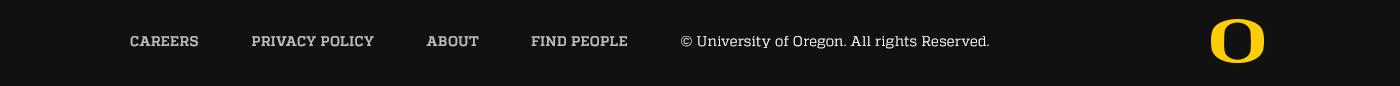
<style>
.page{position:relative;width:1400px;height:86px;background:#111111}
.page>*{position:absolute;margin:0}
.t1{font:14px "Quadon-Bold";letter-spacing:0.025em;color:#bbbbbb;text-transform:uppercase}
.t2{font:14px "Quadon-Regular";letter-spacing:0.025em;color:#ffffff;text-transform:uppercase}
.t3{font:14px "Quadon-Regular";letter-spacing:0.025em;color:#ffffff}
</style>
<div class="page">
<p class="t1" style="left:130px;top:35px;width:859px;height:14px">Careers              Privacy Policy              About              FIND PEOPLE              <span class="t2">© </span><span class="t3">University of Oregon. All rights Reserved.</span></p>
</div>
